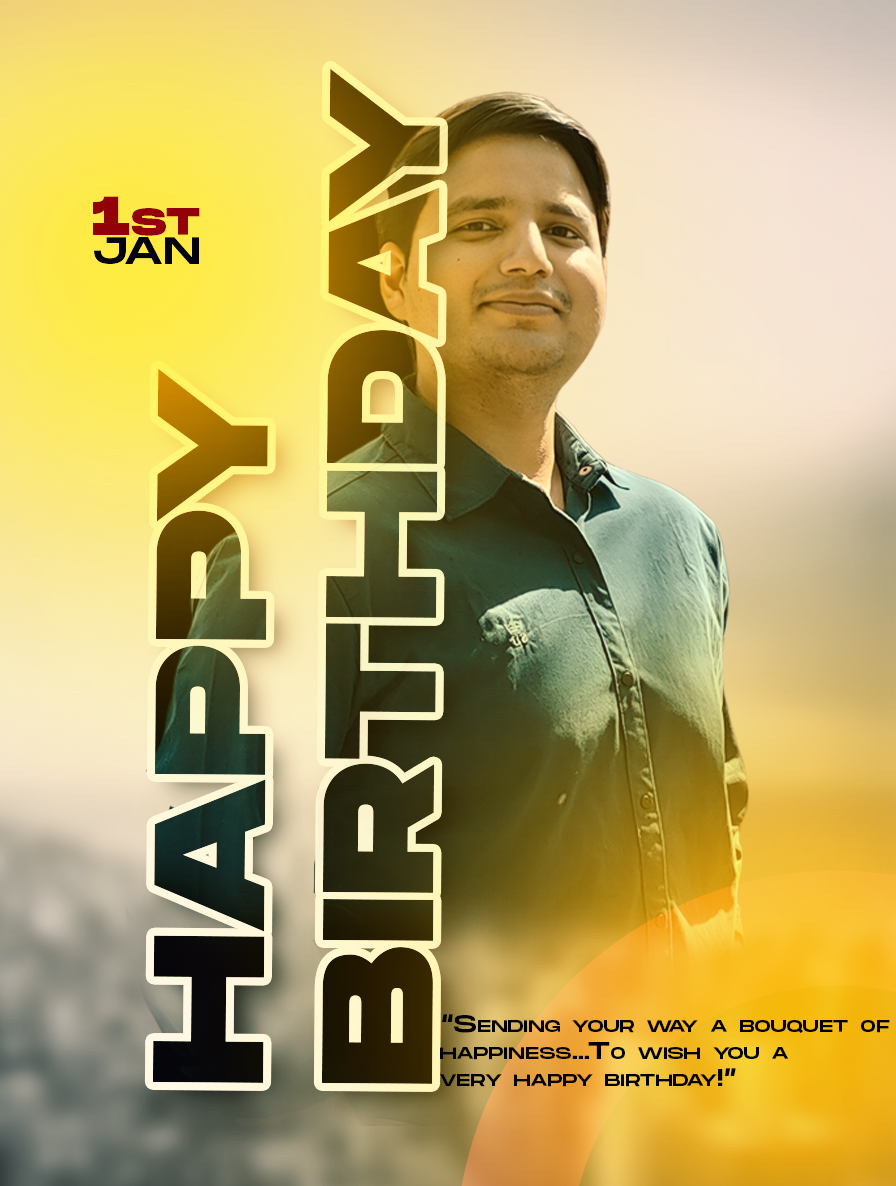
<style>
.page{position:relative;width:896px;height:1186px}
.page>*{position:absolute;margin:0}
.t1{font:224.6px/169.3px "MonumentExtended-Ultrabold";letter-spacing:0.01em;font-variant:small-caps}
.t2{font:54.8px/28.7px "MonumentExtended-Ultrabold";letter-spacing:0.01em;color:#a30417;font-variant:small-caps}
.t3{font:54.8px/28.7px "MonumentExtended-Regular";letter-spacing:0.01em;color:#050504;font-variant:small-caps}
.t4{font:24.2px/26.8px "MonumentExtended-Regular";letter-spacing:0.01em;color:#000000;font-variant:small-caps}
</style>
<div class="page">
<p class="t1" style="left:152px;top:68px;width:288px;height:1016px;rotate:-90deg">happy<br>birthday</p>
<p class="t2" style="left:93px;top:196px;width:107px;height:68px">1st<br><span class="t3">jan</span></p>
<p class="t4" style="left:440px;top:1014px;width:450px;height:73px">“Sending your way a bouquet of <br>happiness…To wish you a <br>very happy birthday!”</p>
</div>
